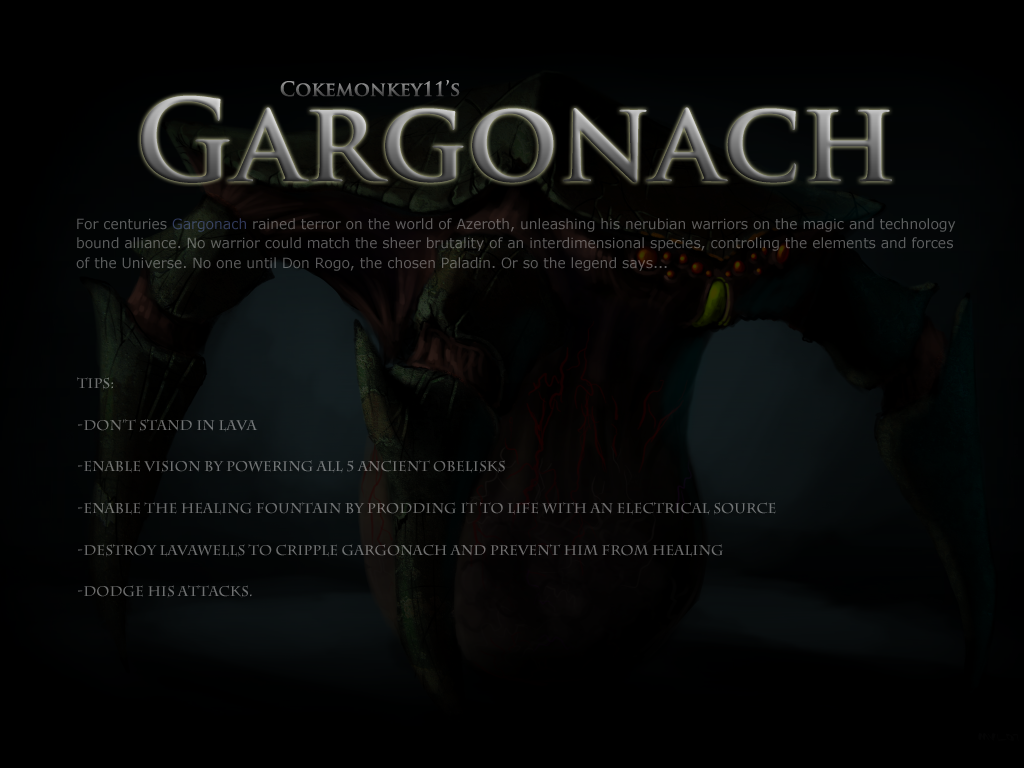
<style>
.page{position:relative;width:1024px;height:768px;background:#000000}
.page>*{position:absolute;margin:0}
.t1{font:19.4px "TrajanPro-Bold"}
.t2{font:111.1px "TrajanPro-Bold"}
.t3{font:13.9px/19.4px "Verdana";color:#5c5c5b}
.t4{font:13.9px/41.7px "CharlemagneStd-Bold";color:#6e6e6e}
</style>
<div class="page">
<p class="t1" style="left:280px;top:80px;width:180px;height:17px">Cokemonkey11’s</p>
<p class="t2" style="left:141px;top:95px;width:751px;height:88px">Gargonach</p>
<p class="t3" style="left:76px;top:218px;width:880px;height:53px">For centuries Gargonach rained terror on the world of Azeroth, unleashing his nerubian warriors on the magic and technology<br>bound alliance. No warrior could match the sheer brutality of an interdimensional species, controling the elements and forces<br>of the Universe. No one until Don Rogo, the chosen Paladin. Or so the legend says...</p>
<p class="t4" style="left:77px;top:377px;width:699px;height:221px">Tips:<br>-Don’t stand in lava<br>-Enable vision by powering all 5 ancient obelisks<br>-Enable the healing fountain by prodding it to life with an electrical source<br>-Destroy lavawells to cripple Gargonach and prevent him from healing<br>-Dodge his attacks.</p>
</div>
